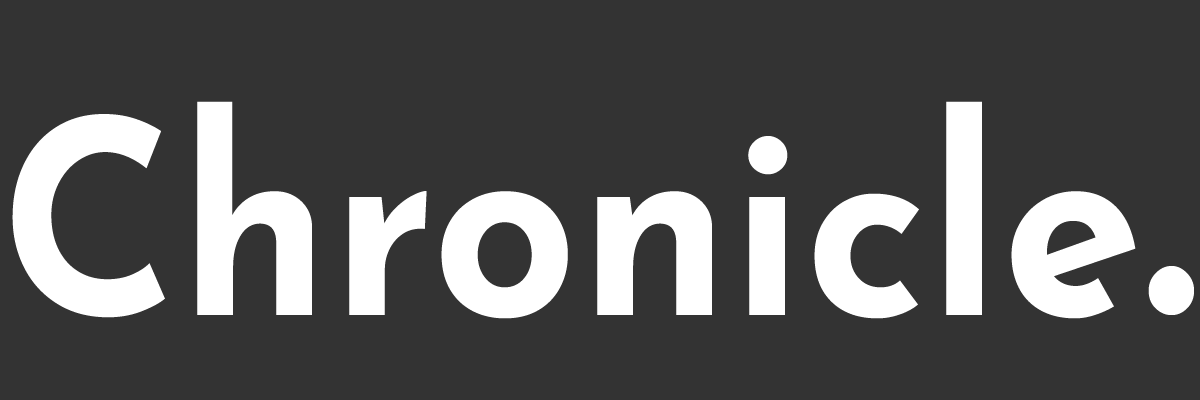
<style>
.page{position:relative;width:1200px;height:400px;background:#333333}
.page>*{position:absolute;margin:0}
.t1{font:270px "JosefinSans-Bold";letter-spacing:0.005em;color:#ffffff;scale:0.94 1}
.t2{font:337.5px "JosefinSans-Bold";letter-spacing:0.005em;color:#ffffff;scale:0.94 1}
</style>
<div class="page">
<p class="t1" style="left:12px;top:101px;width:1182px;height:218px">Chronicle<span class="t2">.</span></p>
</div>
